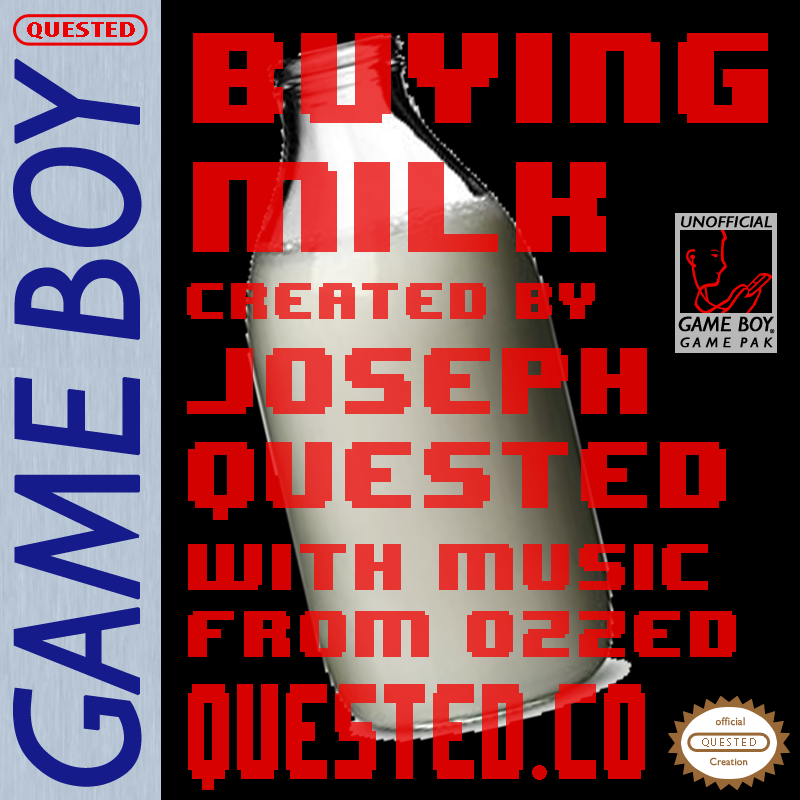
<style>
.page{position:relative;width:800px;height:800px;background:#000000}
.page>*{position:absolute;margin:0}
.t1{font:21.8px "MyriadPro-BoldCond";color:#eb0101;scale:1.65 1}
.t2{font:107.8px "8BITWONDERNominal";color:#eb0101}
.t3{font:78.8px "8BITWONDERNominal"}
.t4{font:43.8px "8BITWONDERNominal"}
.t5{font:55.8px "8BITWONDERNominal"}
.t6{font:114px "8BITWONDERNominal";color:#eb0101;scale:0.43 1}
.t7{font:10.8px "MyriadPro-Regular";color:#996837}
</style>
<div class="page">
<p class="t1" style="left:27px;top:22px;width:108px;height:17px">QUESTED</p>
<p class="t2" style="left:193px;top:33px;width:575px;height:219px;opacity:0.88">buying<br>milk</p>
<p class="t3" style="left:187px;top:283px;width:539px;height:225px"><span class="t4">created by<br></span>joseph<br>Quested</p>
<p class="t5" style="left:188px;top:544px;width:548px;height:113px">WITH MUSIC <br>FROM OZZED</p>
<p class="t6" style="left:188px;top:684px;width:457px;height:95px;opacity:0.87">quested co</p>
<p class="t7" style="left:702px;top:738px;width:54px;height:9px">QU E S T E D</p>
</div>
